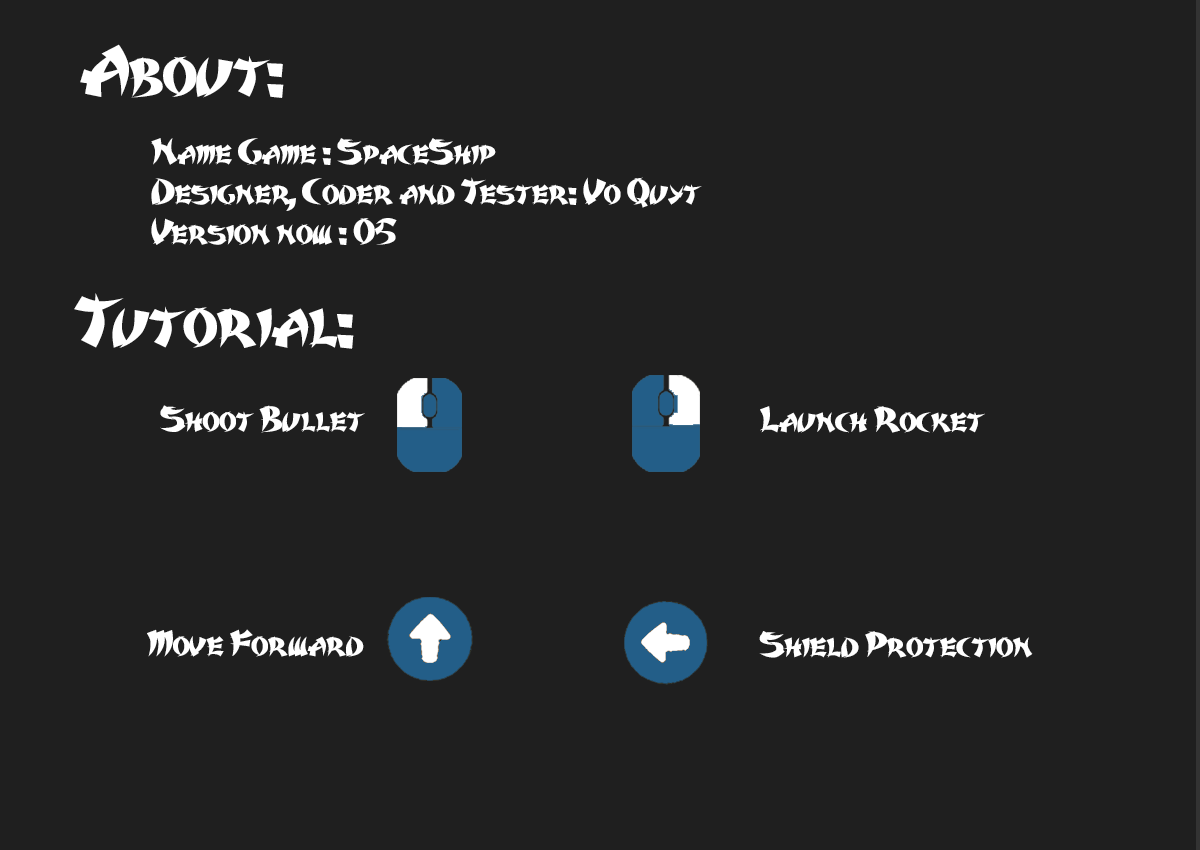
<style>
.page{position:relative;width:1200px;height:850px;background:#1f1f1f}
.page>*{position:absolute;margin:0}
.t1{font:66.7px "UTM-Karate";color:#ffffff}
.t2{font:33.3px "UTM-Karate";color:#ffffff}
</style>
<div class="page">
<p class="t1" style="left:80px;top:44px;width:204px;height:54px">About:</p>
<p class="t2" style="left:151px;top:138px;width:551px;height:107px">Name Game : SpaceShip<br>Designer, Coder and Tester: Vo Quyt<br>Version now : 05</p>
<p class="t1" style="left:74px;top:293px;width:280px;height:56px">Tutorial:</p>
<p class="t2" style="left:160px;top:405px;width:205px;height:28px">Shoot Bullet</p>
<p class="t2" style="left:760px;top:406px;width:225px;height:27px">Launch Rocket</p>
<p class="t2" style="left:147px;top:629px;width:217px;height:28px">Move Forward</p>
<p class="t2" style="left:759px;top:631px;width:274px;height:27px">Shield Protection</p>
</div>
